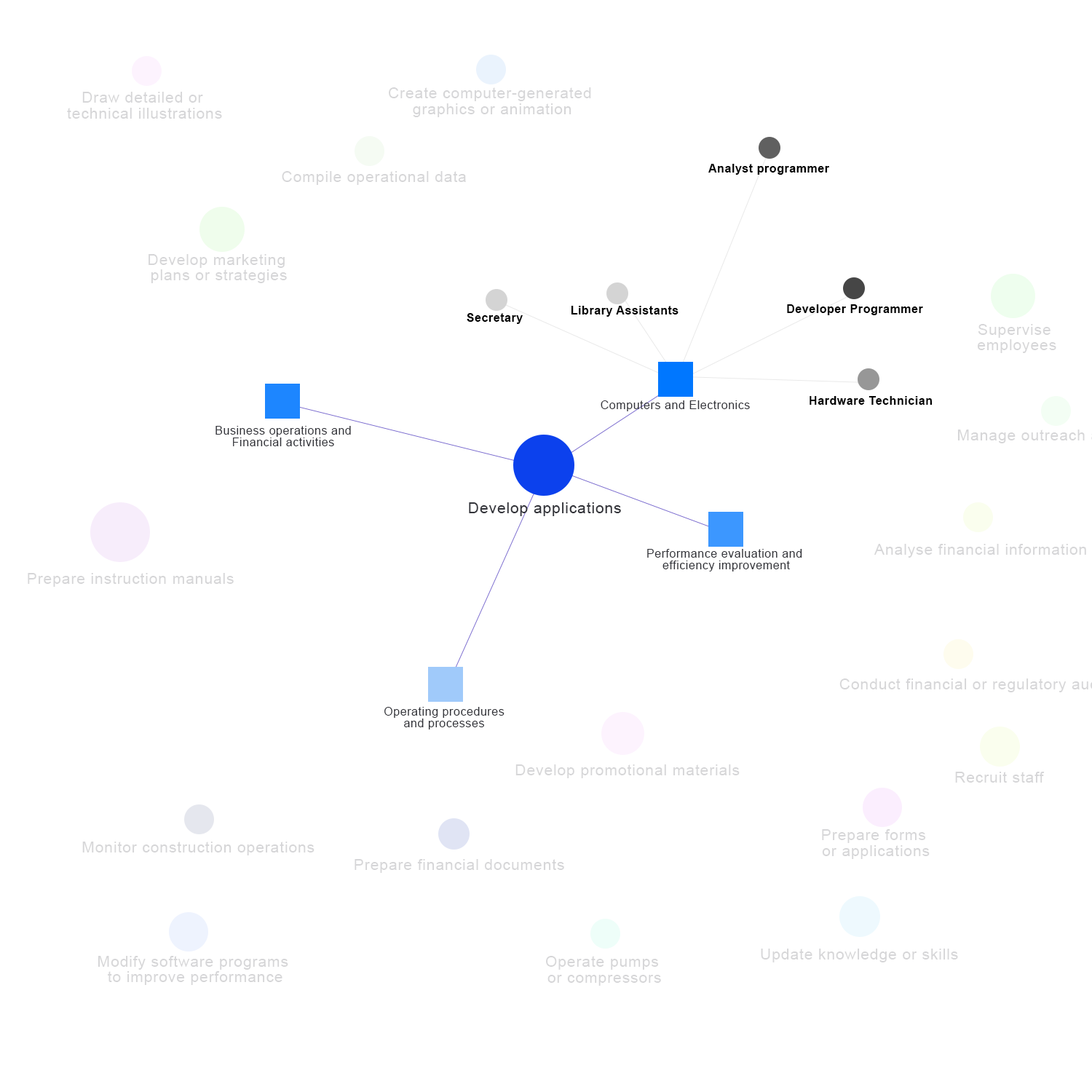
<style>
.page{position:relative;width:1092px;height:1092px;background:#ffffff}
.page>*{position:absolute;margin:0}
.t1{font:15.5px/15.5px "ArialMT";letter-spacing:0.035em;color:#d6d6d8}
.t2{font:15.5px "ArialMT";letter-spacing:0.035em;color:#d6d6d8}
.t3{font:11.6px "Arial-BoldMT";letter-spacing:0.035em;color:#000000}
.t4{font:11.6px "ArialMT";letter-spacing:0.035em;color:#33343a}
.t5{font:11.6px/11.6px "ArialMT";letter-spacing:0.035em;color:#33343a}
.t6{font:15.5px "ArialMT";letter-spacing:0.035em;color:#33343a}
</style>
<div class="page">
<p class="t1" style="left:389px;top:87px;width:202px;height:30px;text-align:center">Create computer-generated <br>graphics or animation</p>
<p class="t1" style="left:67px;top:92px;width:155px;height:27px;text-align:center">Draw detailed or <br>technical illustrations</p>
<p class="t2" style="left:282px;top:171px;width:184px;height:14px">Compile operational data</p>
<p class="t3" style="left:708px;top:164px;width:121px;height:11px">Analyst programmer</p>
<p class="t1" style="left:149px;top:254px;width:138px;height:29px;text-align:center">Develop marketing <br>plans or strategies</p>
<p class="t3" style="left:571px;top:306px;width:107px;height:11px">Library Assistants</p>
<p class="t3" style="left:787px;top:304px;width:136px;height:11px">Developer Programmer</p>
<p class="t3" style="left:467px;top:313px;width:56px;height:11px">Secretary</p>
<p class="t1" style="left:977px;top:324px;width:79px;height:29px;text-align:center">Supervise <br>employees</p>
<p class="t4" style="left:601px;top:400px;width:149px;height:11px">Computers and Electronics</p>
<p class="t3" style="left:810px;top:396px;width:123px;height:9px">Hardware Technician</p>
<p class="t5" style="left:215px;top:426px;width:136px;height:20px;text-align:center">Business operations and <br>Financial activities</p>
<p class="t6" style="left:469px;top:502px;width:152px;height:14px">Develop applications</p>
<p class="t2" style="left:874px;top:544px;width:212px;height:14px">Analyse financial information</p>
<p class="t5" style="left:647px;top:549px;width:155px;height:22px;text-align:center">Performance evaluation and <br>efficiency improvement</p>
<p class="t2" style="left:28px;top:573px;width:206px;height:14px">Prepare instruction manuals</p>
<p class="t5" style="left:384px;top:707px;width:120px;height:22px;text-align:center">Operating procedures <br>and processes</p>
<p class="t2" style="left:515px;top:764px;width:225px;height:14px">Develop promotional materials</p>
<p class="t2" style="left:955px;top:772px;width:90px;height:11px">Recruit staff</p>
<p class="t1" style="left:822px;top:829px;width:108px;height:30px;text-align:center">Prepare forms <br>or applications</p>
<p class="t2" style="left:82px;top:842px;width:232px;height:13px">Monitor construction operations</p>
<p class="t2" style="left:355px;top:859px;width:209px;height:14px">Prepare financial documents</p>
<p class="t2" style="left:761px;top:949px;width:197px;height:13px">Update knowledge or skills</p>
<p class="t1" style="left:98px;top:956px;width:190px;height:29px;text-align:center">Modify software programs <br>to improve performance</p>
<p class="t1" style="left:546px;top:956px;width:115px;height:30px;text-align:center">Operate pumps <br>or compressors</p>
</div>
